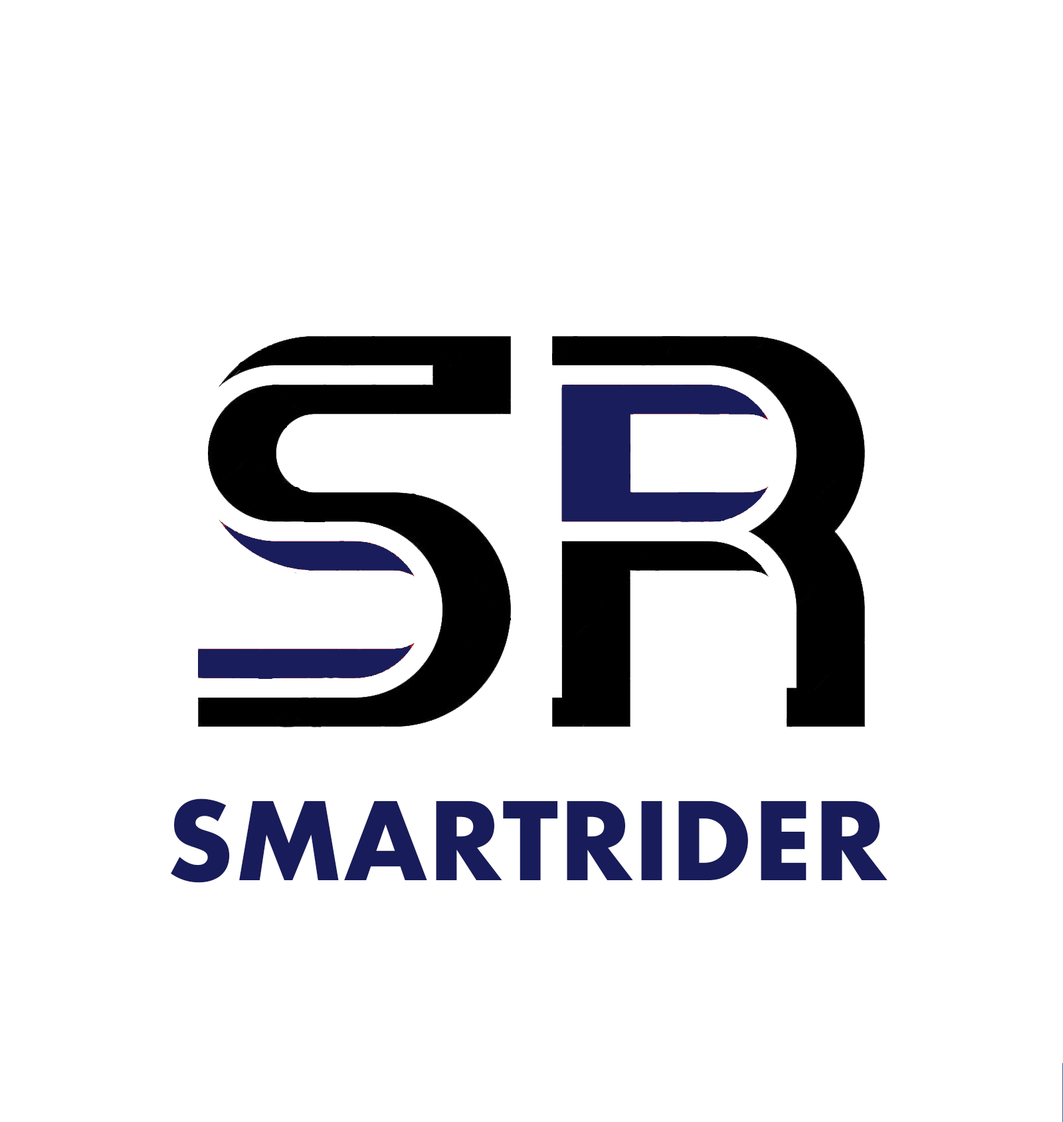
<style>
.page{position:relative;width:1063px;height:1122px;background:#ffffff}
.page>*{position:absolute;margin:0}
.t1{font:105.2px "Futura-Bold";color:#181c5a}
</style>
<div class="page">
<p class="t1" style="left:171px;top:798px;width:716px;height:85px">SMARTRIDER</p>
</div>
